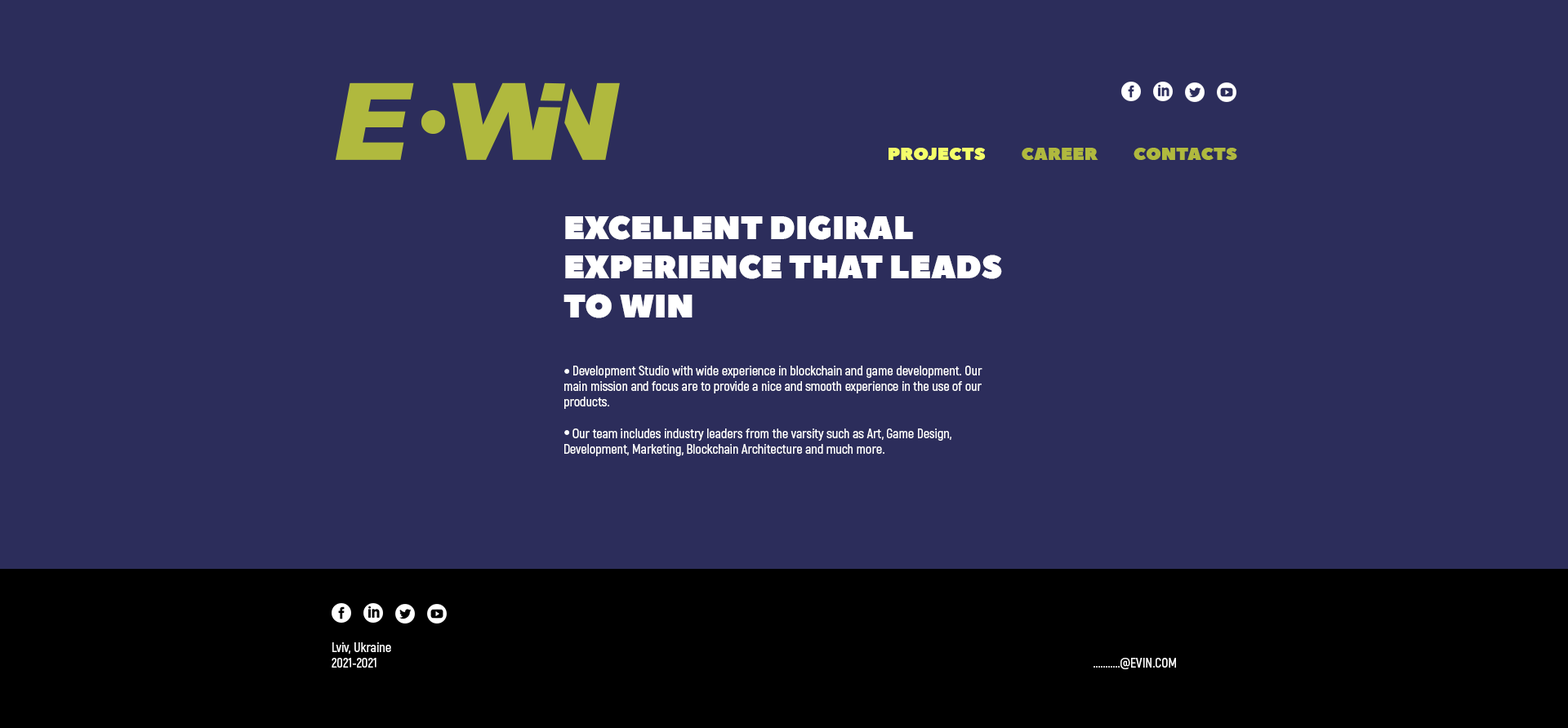
<style>
.page{position:relative;width:1568px;height:728px;background:#2c2d5b}
.page>*{position:absolute;margin:0}
.t1{font:18px "PeaceSans";color:#b0b93e;text-transform:uppercase}
.t2{font:18px "PeaceSans";color:#f4ff6a;text-transform:uppercase}
.t3{font:32.7px "PeaceSans";color:#ffffff}
.t4{font:13.1px "Akrobat-SemiBold";color:#ffffff}
.t5{font:13.1px "Akrobat-SemiBold";color:#ffffff;text-transform:uppercase}
</style>
<div class="page">
<p class="t1" style="left:889px;top:148px;width:348px;height:12px"><span class="t2">PROJECTS </span>         CAREER          contacts</p>
<p class="t3" style="left:564px;top:216px;width:438px;height:102px">EXCELLENT DIGIRAL EXPERIENCE THAT LEADS TO WIN</p>
<p class="t4" style="left:564px;top:366px;width:418px;height:91px">Development Studio with wide experience in blockchain and game development. Our main mission and focus are to provide a nice and smooth experience in the use of our products.<br><br>   Our team includes industry leaders from the varsity such as Art, Game Design, Development, Marketing, Blockchain Architecture and much more.</p>
<p class="t4" style="left:332px;top:643px;width:59px;height:25px">Lviv, Ukraine<br>2021-2021</p>
<p class="t5" style="left:1094px;top:658px;width:82px;height:12px">...........@EVIN.COM</p>
</div>
